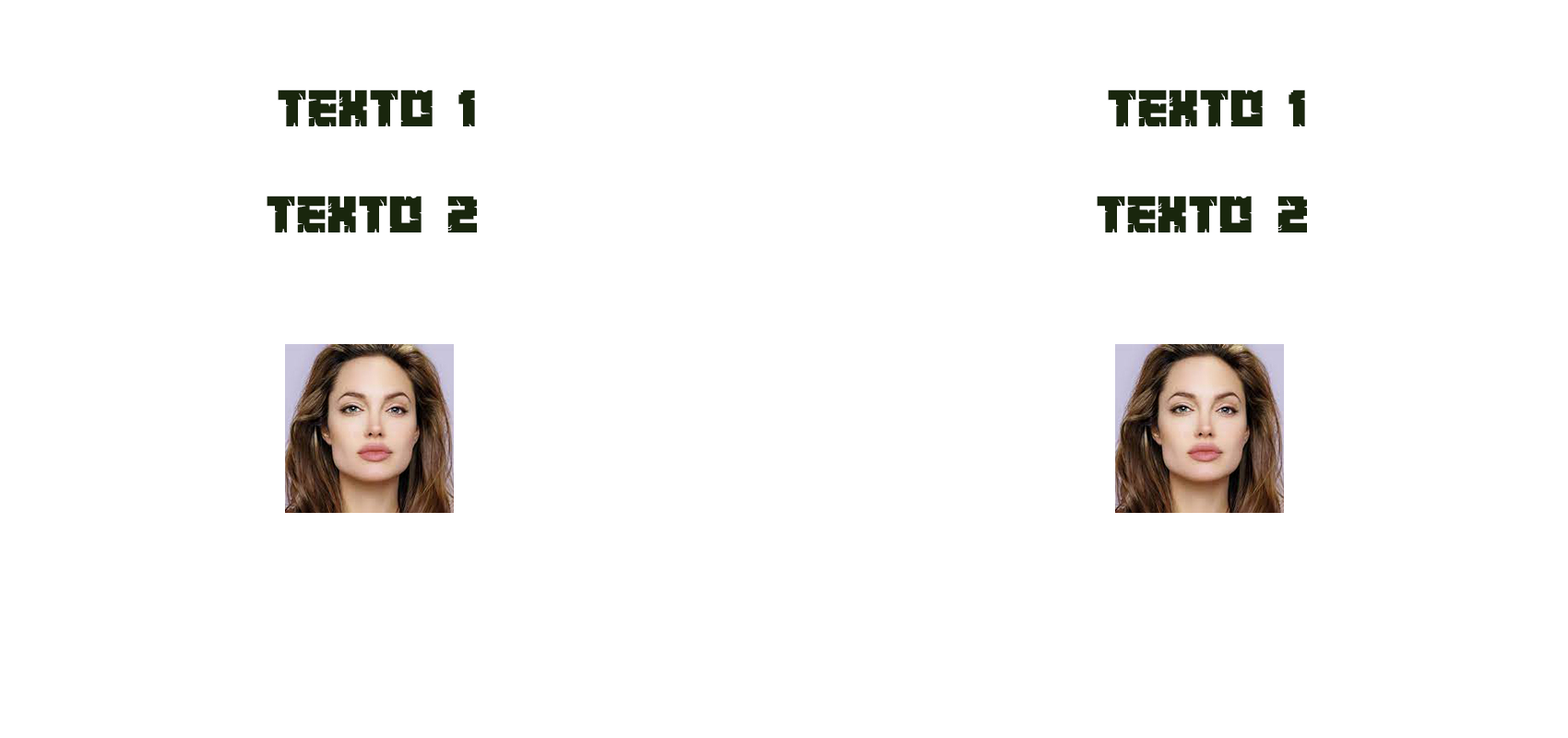
<style>
.page{position:relative;width:1568px;height:738px;background:#ffffff}
.page>*{position:absolute;margin:0}
.t1{font:46.1px "MinecrafterAlt";color:#19260d}
</style>
<div class="page">
<p class="t1" style="left:278px;top:89px;width:197px;height:37px">Texto 1</p>
<p class="t1" style="left:1108px;top:89px;width:197px;height:37px">Texto 1</p>
<p class="t1" style="left:267px;top:196px;width:210px;height:36px">Texto 2</p>
<p class="t1" style="left:1097px;top:196px;width:210px;height:36px">Texto 2</p>
</div>
